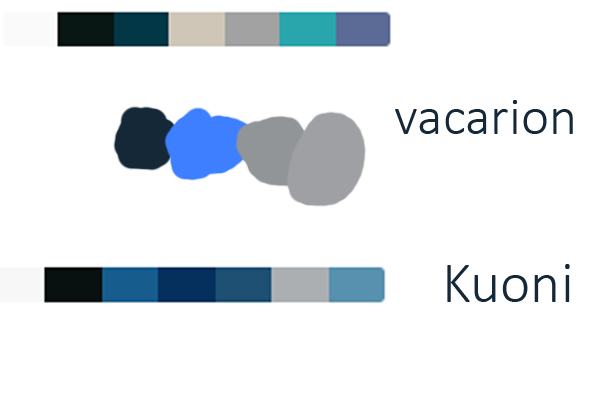
<style>
.page{position:relative;width:600px;height:400px;background:#ffffff}
.page>*{position:absolute;margin:0}
.t1{font:53.9px "Calibri-Light";color:#142838}
.t2{font:58px "Calibri-Light";color:#142838}
</style>
<div class="page">
<p class="t1" style="left:395px;top:100px;width:178px;height:34px">vacarion</p>
<p class="t2" style="left:447px;top:264px;width:123px;height:38px">Kuoni</p>
</div>
